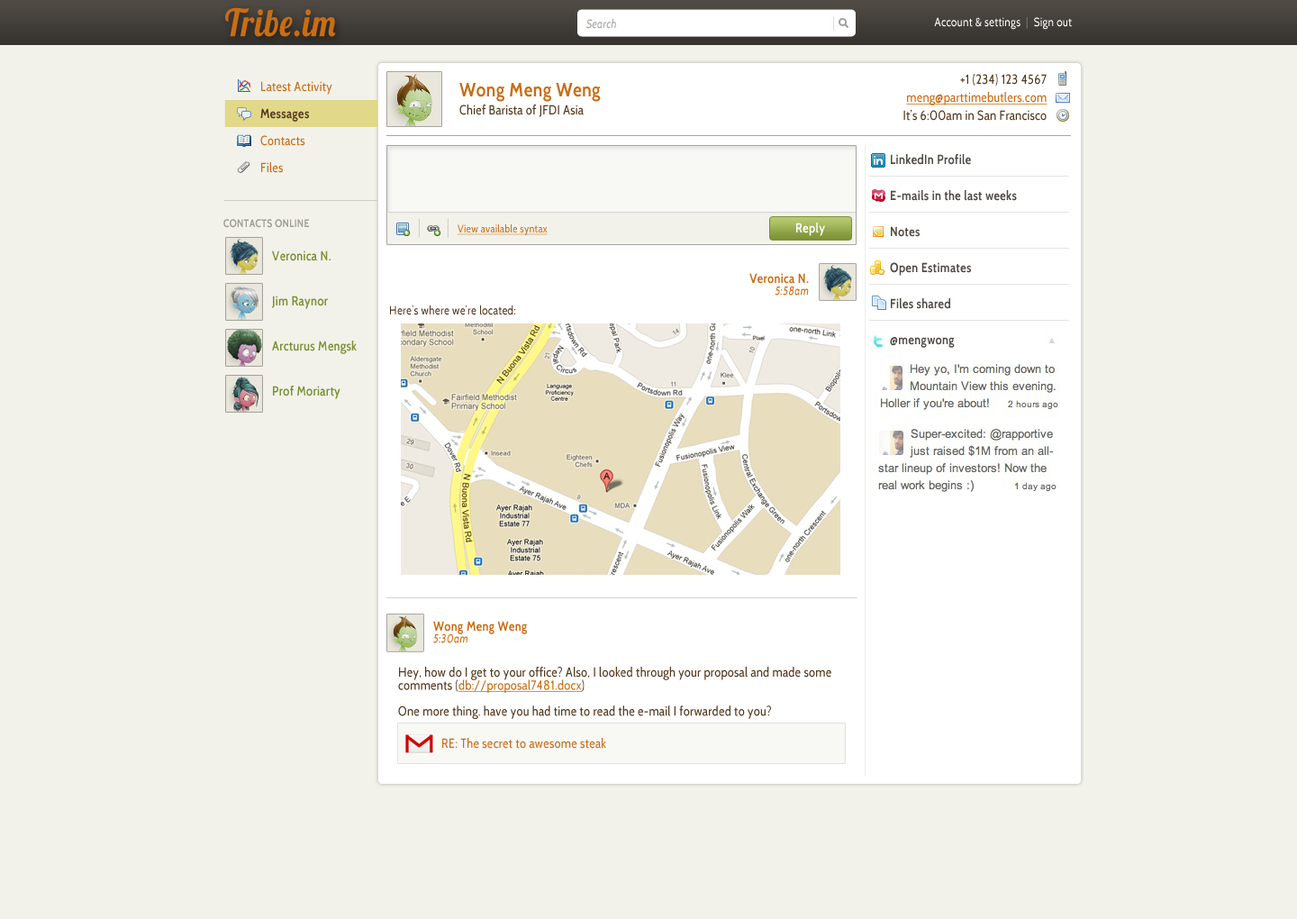
<style>
.page{position:relative;width:1297px;height:919px;background:#f2f2eb}
.page>*{position:absolute;margin:0}
.t1{font:37.8px "Lobster1.4";letter-spacing:0.025em;color:#c96d14;scale:0.88 1}
.t2{font:11.9px "Cabin-Regular";letter-spacing:0.025em;color:#ffffff;scale:0.88 1}
.t3{font:11.9px "Cabin-Regular";letter-spacing:0.025em;color:#7a736b;scale:0.88 1}
.t4{font:11.9px "Cabin-Italic";letter-spacing:0.025em;color:#a7a4a1;scale:0.88 1}
.t5{font:13px/18px "Cabin-Regular";letter-spacing:0.025em;color:#54381d;scale:0.88 1}
.t6{font:13px/18px "Cabin-Regular";letter-spacing:0.025em;color:#c96d14;text-decoration:underline;scale:0.88 1}
.t7{font:13px/27px "Cabin-Regular";letter-spacing:0.025em;color:#c96d14;scale:0.88 1}
.t8{font:13px/27px "Cabin-Bold";letter-spacing:0.025em;color:#54381d;scale:0.88 1}
.t9{font:19.5px/18px "Cabin-Bold";letter-spacing:0.025em;color:#c96d14;scale:0.88 1}
.t10{font:13px/36px "Cabin-Bold";letter-spacing:0.025em;color:#4f4a44;scale:0.88 1}
.t11{font:10.8px "Cabin-Bold";letter-spacing:0.025em;color:#a09e97;text-transform:uppercase;scale:0.88 1}
.t12{font:10.8px "Cabin-Regular";letter-spacing:0.025em;color:#c96d14;text-decoration:underline;scale:0.88 1}
.t13{font:13px "Cabin-Bold";letter-spacing:0.025em;color:#ffffff;scale:0.88 1}
.t14{font:13px/45.1px "Cabin-SemiBold";letter-spacing:0.025em;color:#7c9034;scale:0.88 1}
.t15{font:13px "Cabin-Bold";letter-spacing:0.025em;color:#c96d14;scale:0.88 1}
.t16{font:11.9px "Cabin-Italic";letter-spacing:0.025em;color:#c96d14;scale:0.88 1}
.t17{font:11.9px "Cabin-Regular";letter-spacing:0.025em;color:#54381d;scale:0.88 1}
.t18{font:13px "Cabin-Regular";letter-spacing:0.025em;color:#54381d;scale:0.88 1}
.t19{font:13px "Cabin-Regular";letter-spacing:0.025em;color:#c96d14;text-decoration:underline;scale:0.88 1}
.t20{font:13px "Cabin-Regular";letter-spacing:0.025em;color:#c96d14;scale:0.88 1}
</style>
<div class="page">
<p class="t1" style="left:225px;top:7px;width:111px;height:30px">Tribe.im</p>
<p class="t2" style="left:934px;top:17px;width:138px;height:13px">Account &amp; settings  <span class="t3">|</span>  Sign out</p>
<p class="t4" style="left:587px;top:19px;width:29px;height:10px">Search</p>
<p class="t5" style="left:904px;top:74px;width:144px;height:47px;text-align:right">+1 (234) 123 4567<br><span class="t6">meng@parttimebutlers.com<br></span>It’s 6:00am in San Francisco</p>
<p class="t7" style="left:260px;top:81px;width:72px;height:92px">Latest Activity<br><span class="t8">Messages<br></span>Contacts<br>Files</p>
<p class="t5" style="left:460px;top:83px;width:141px;height:34px"><span class="t9">Wong Meng Weng<br></span>Chief Barista of JFDI Asia</p>
<p class="t10" style="left:890px;top:154px;width:127px;height:194px">LinkedIn Profile<br>E-mails in the last weeks<br>Notes<br>Open Estimates<br>Files shared<br>@mengwong</p>
<p class="t11" style="left:223px;top:219px;width:86px;height:9px">Contacts Online</p>
<p class="t12" style="left:458px;top:224px;width:90px;height:11px">View available syntax</p>
<p class="t13" style="left:797px;top:223px;width:28px;height:13px">Reply</p>
<p class="t14" style="left:272px;top:250px;width:85px;height:149px">Veronica N.<br>Jim Raynor<br>Arcturus Mengsk<br>Prof Moriarty</p>
<p class="t15" style="left:750px;top:273px;width:59px;height:23px;text-align:right">Veronica N.<br><span class="t16">5:58am</span></p>
<p class="t17" style="left:390px;top:305px;width:125px;height:10px">Here’s where we’re located:</p>
<p class="t15" style="left:433px;top:621px;width:94px;height:22px">Wong Meng Weng<br><span class="t16">5:30am</span></p>
<p class="t18" style="left:398px;top:667px;width:434px;height:52px">Hey, how do I get to your office? Also, I looked through your proposal and made some<br>comments (<span class="t19">db://proposal7481.docx</span>)<br><br>One more thing. have you had time to read the e-mail I forwarded to you?</p>
<p class="t20" style="left:442px;top:738px;width:164px;height:11px">RE: The secret to awesome steak</p>
</div>
